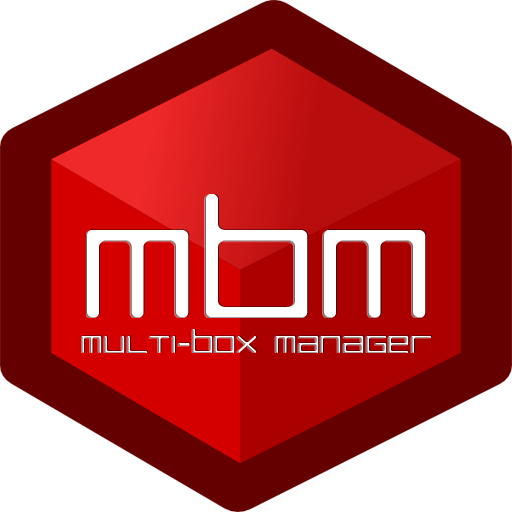
<style>
.page{position:relative;width:512px;height:512px;background:#ffffff}
.page>*{position:absolute;margin:0}
.t1{font:160.9px "LuggageRoundLight";color:#ffffff;scale:1.14 1}
.t2{font:30.8px "LuggageRoundLight";scale:1.14 1}
</style>
<div class="page">
<p class="t1" style="left:86px;top:194px;width:340px;height:124px">MBM</p>
<p class="t2" style="left:81px;top:329px;width:351px;height:24px">multi-box manager</p>
</div>
